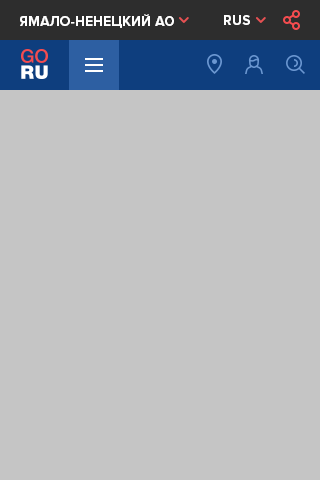
<style>
.page{position:relative;width:320px;height:480px;background:#c5c5c5}
.page>*{position:absolute;margin:0}
.t1{font:14px "ProximaNova-Bold";color:#ffffff;text-transform:uppercase}
</style>
<div class="page">
<p class="t1" style="left:20px;top:14px;width:154px;height:14px">Ямало-ненецкий АО</p>
<p class="t1" style="left:224px;top:15px;width:26px;height:10px">rus</p>
</div>
